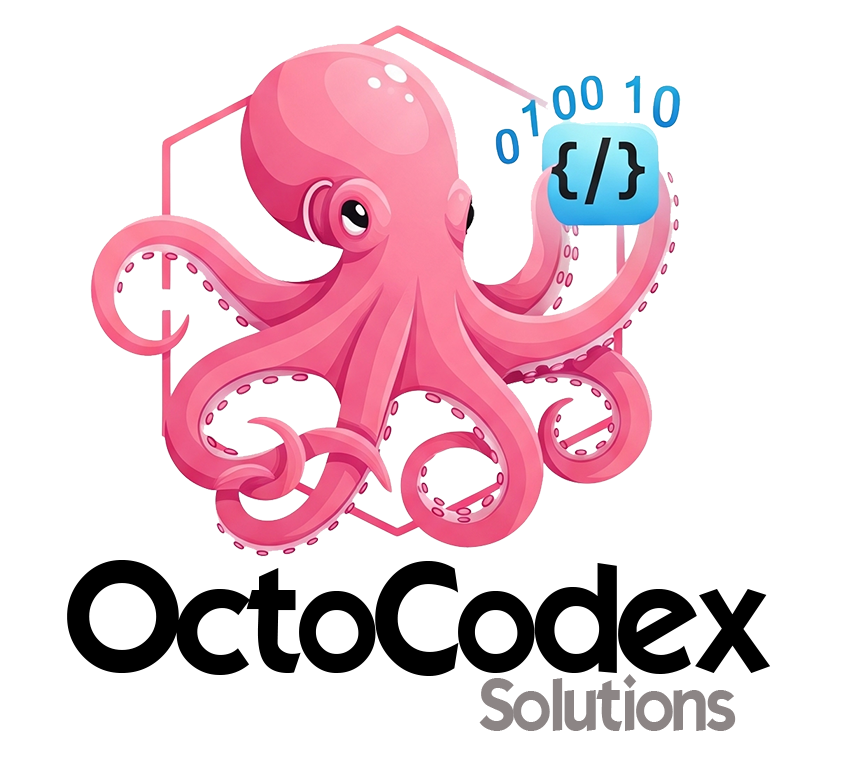
<style>
.page{position:relative;width:845px;height:761px;background:#ffffff}
.page>*{position:absolute;margin:0}
.t1{font:150px "ELEGANCE";color:#000000}
.t2{font:72px "ELEGANCE";color:#8c8585}
</style>
<div class="page">
<p class="t1" style="left:67px;top:560px;width:704px;height:116px">OctoCodex</p>
<p class="t2" style="left:479px;top:674px;width:257px;height:57px">Solutions</p>
</div>
